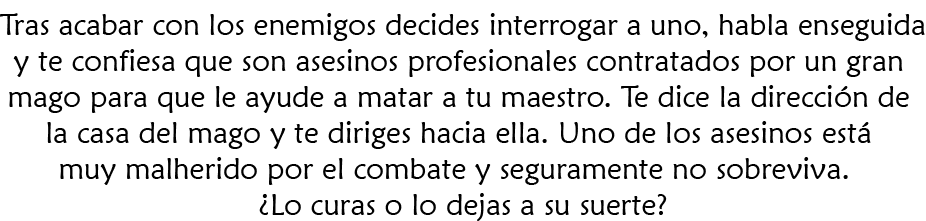
<style>
.page{position:relative;width:926px;height:221px;background:#ffffff}
.page>*{position:absolute;margin:0}
.t1{font:30px "MaiandraGD-Regular";color:#000000}
</style>
<div class="page">
<p class="t1" style="left:0px;top:13px;width:925px;height:208px;text-align:center">Tras acabar con los enemigos decides interrogar a uno, habla enseguida<br>y te confiesa que son asesinos profesionales contratados por un gran <br>mago para que le ayude a matar a tu maestro. Te dice la dirección de <br>la casa del mago y te diriges hacia ella. Uno de los asesinos está <br>muy malherido por el combate y seguramente no sobreviva.  <br>¿Lo curas o lo dejas a su suerte?</p>
</div>
